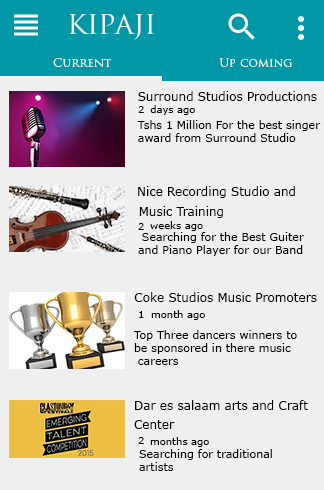
<style>
.page{position:relative;width:324px;height:490px;background:#efefef}
.page>*{position:absolute;margin:0}
.t1{font:30px "TrajanPro-Regular";color:#efefef}
.t2{font:12px "TrajanPro-Regular";color:#efefef}
.t3{font:12px "Verdana";color:#000000}
.t4{font:10px "Verdana";color:#000000}
.t5{font:11px "Verdana";color:#000000}
</style>
<div class="page">
<p class="t1" style="left:69px;top:14px;width:85px;height:26px">kipaji</p>
<p class="t2" style="left:53px;top:58px;width:58px;height:9px">Current</p>
<p class="t2" style="left:219px;top:58px;width:73px;height:9px">Up coming</p>
<p class="t3" style="left:138px;top:91px;width:179px;height:10px">Surround Studios Productions</p>
<p class="t4" style="left:138px;top:106px;width:6px;height:7px">2</p>
<p class="t4" style="left:150px;top:105px;width:45px;height:10px">days ago</p>
<p class="t5" style="left:137px;top:120px;width:184px;height:22px;text-align:right">Tshs 1 Million For the best singer <br>award from Surround Studio</p>
<p class="t3" style="left:138px;top:186px;width:157px;height:12px">Nice Recording Studio and</p>
<p class="t3" style="left:139px;top:206px;width:84px;height:12px">Music Training</p>
<p class="t4" style="left:150px;top:221px;width:53px;height:10px">weeks ago</p>
<p class="t4" style="left:138px;top:223px;width:6px;height:7px">2</p>
<p class="t5" style="left:138px;top:232px;width:166px;height:24px;text-align:right">Searching for the Best Guiter <br>and Piano Player for our Band</p>
<p class="t3" style="left:134px;top:292px;width:183px;height:10px">Coke Studios Music Promoters</p>
<p class="t4" style="left:139px;top:311px;width:5px;height:7px">1</p>
<p class="t4" style="left:151px;top:310px;width:54px;height:10px">month ago</p>
<p class="t5" style="left:133px;top:330px;width:164px;height:35px;text-align:right">Top Three dancers winners to<br>be sponsored in there music<br>careers</p>
<p class="t3" style="left:135px;top:400px;width:173px;height:10px">Dar es salaam arts and Craft</p>
<p class="t3" style="left:134px;top:420px;width:41px;height:9px">Center</p>
<p class="t4" style="left:138px;top:437px;width:6px;height:7px">2</p>
<p class="t4" style="left:150px;top:437px;width:59px;height:10px">months ago</p>
<p class="t5" style="left:139px;top:449px;width:133px;height:22px;text-align:right">Searching for traditional<br>artists</p>
</div>
